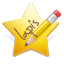
<style>
.page{position:relative;width:64px;height:64px;background:#ffffff}
.page>*{position:absolute;margin:0}
.t1{font:48.7px "JellykaEstryasHandwriting";color:#92624f}
</style>
<div class="page">
<p class="t1" style="left:13px;top:20px;width:27px;height:21px;rotate:-45deg">lapis</p>
</div>
